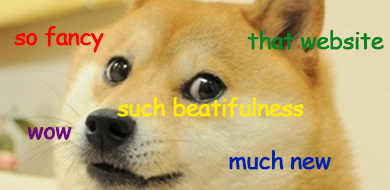
<style>
.page{position:relative;width:390px;height:190px}
.page>*{position:absolute;margin:0}
.t1{font:24px "ComicSansMS";letter-spacing:-0.05em;color:#ff0000;font-weight:bold}
.t2{font:24px "ComicSansMS";letter-spacing:-0.05em;color:#098423;font-weight:bold}
.t3{font:24px "ComicSansMS";letter-spacing:-0.05em;color:#ffea00;font-weight:bold}
.t4{font:24px "ComicSansMS";letter-spacing:-0.05em;color:#6d0c7f;font-weight:bold}
.t5{font:24px "ComicSansMS";letter-spacing:-0.05em;color:#0023a6;font-weight:bold}
</style>
<div class="page">
<p class="t1" style="left:14px;top:26px;width:90px;height:27px">so fancy</p>
<p class="t2" style="left:247px;top:30px;width:137px;height:20px">that website</p>
<p class="t3" style="left:117px;top:97px;width:187px;height:21px">such beatifulness</p>
<p class="t4" style="left:27px;top:127px;width:45px;height:13px">wow</p>
<p class="t5" style="left:229px;top:150px;width:102px;height:20px">much new</p>
</div>
